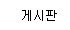
<style>
.page{position:relative;width:70px;height:30px;background:#ffffff}
.page>*{position:absolute;margin:0}
.t1{font:12px "GulimChe";color:#000000;font-variant:small-caps}
</style>
<div class="page">
<p class="t1" style="left:22px;top:10px;width:35px;height:11px">게시판</p>
</div>
